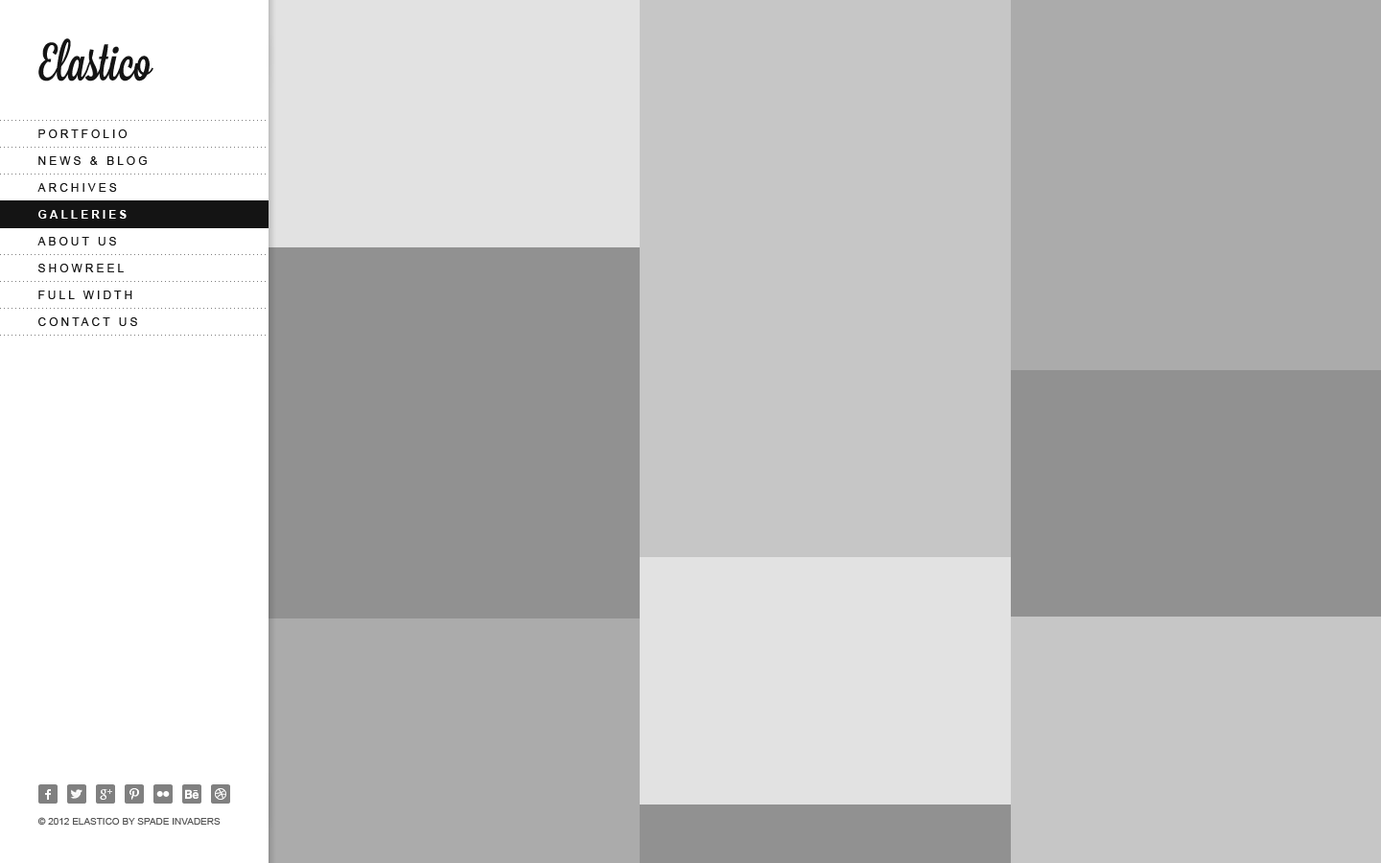
<style>
.page{position:relative;width:1381px;height:863px;background:#c6c6c6}
.page>*{position:absolute;margin:0}
.t1{font:11.5px "ArialMT";letter-spacing:0.25em;color:#141414;text-transform:uppercase}
.t2{font:11.5px "Arial-BoldMT";letter-spacing:0.25em;color:#ffffff;text-transform:uppercase}
.t3{font:9.6px "ArialMT";color:#555555;text-transform:uppercase}
</style>
<div class="page">
<p class="t1" style="left:38px;top:129px;width:90px;height:9px">portfolio</p>
<p class="t1" style="left:38px;top:156px;width:109px;height:9px">news &amp; blog</p>
<p class="t1" style="left:37px;top:183px;width:80px;height:9px">archives</p>
<p class="t2" style="left:38px;top:210px;width:89px;height:9px">galleries</p>
<p class="t1" style="left:37px;top:237px;width:79px;height:9px">about us</p>
<p class="t1" style="left:38px;top:264px;width:86px;height:8px">showreel</p>
<p class="t1" style="left:38px;top:291px;width:94px;height:8px">full width</p>
<p class="t1" style="left:38px;top:317px;width:99px;height:9px">contact us</p>
<p class="t3" style="left:37px;top:817px;width:184px;height:9px">© 2012 elastico by spade invaders</p>
</div>
